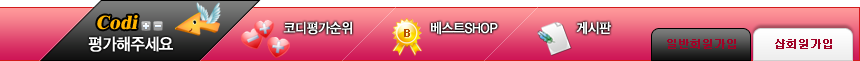
<style>
.page{position:relative;width:860px;height:61px}
.page>*{position:absolute;margin:0}
.t1{font:19.5px "Dutch801BT-ExtraBold";color:#ffb400;font-style:italic}
.t2{font:13.8px "YDIYGO330";letter-spacing:-0.025em;color:#ffffff;font-weight:bold;scale:0.91 1}
.t3{font:11px "Dotum";color:#b35101;font-weight:bold}
.t4{font:17px "YDIYGO330";letter-spacing:-0.025em;color:#ffffff;font-weight:bold;scale:0.91 1}
.t5{font:11px "Dotum";color:#a00327;font-weight:bold}
</style>
<div class="page">
<p class="t1" style="left:97px;top:15px;width:41px;height:15px">Codi</p>
<p class="t2" style="left:283px;top:21px;width:69px;height:14px">코디평가순위</p>
<p class="t3" style="left:404px;top:29px;width:6px;height:8px">B</p>
<p class="t2" style="left:431px;top:21px;width:67px;height:14px">베스트SHOP</p>
<p class="t2" style="left:576px;top:21px;width:35px;height:14px">게시판</p>
<p class="t4" style="left:88px;top:36px;width:85px;height:16px">평가해주세요</p>
<p class="t5" style="left:667px;top:39px;width:69px;height:10px">일반회원가입</p>
<p class="t5" style="left:775px;top:39px;width:57px;height:10px">샵회원가입</p>
</div>
